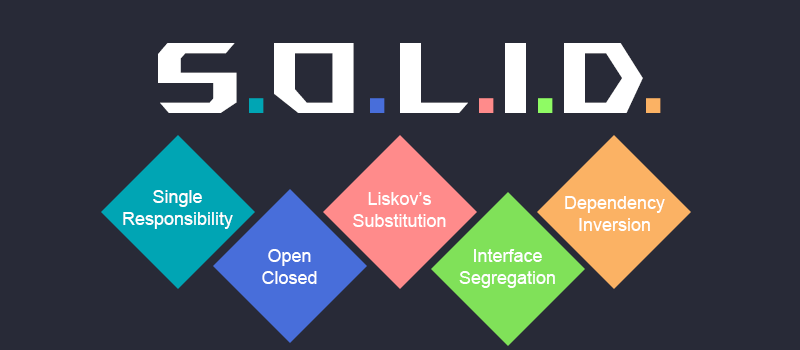
<style>
.page{position:relative;width:800px;height:350px;background:#282a37}
.page>*{position:absolute;margin:0}
.t1{font:100px "AniMeMatrix-MB_EN";color:#ffffff}
.t2{font:100px "AniMeMatrix-MB_EN";color:#00a5b4}
.t3{font:100px "AniMeMatrix-MB_EN";color:#486eda}
.t4{font:100px "AniMeMatrix-MB_EN";color:#ff8b8b}
.t5{font:100px "AniMeMatrix-MB_EN";color:#8ffb64}
.t6{font:100px "AniMeMatrix-MB_EN";color:#fbb264}
.t7{font:18px/22px "ArialMT";color:#ffffff}
</style>
<div class="page">
<p class="t1" style="left:158px;top:43px;width:485px;height:70px">S O L I D</p>
<p class="t2" style="left:249px;top:98px;width:15px;height:15px">.</p>
<p class="t3" style="left:370px;top:98px;width:15px;height:15px">.</p>
<p class="t4" style="left:479px;top:98px;width:15px;height:15px">.</p>
<p class="t5" style="left:538px;top:98px;width:15px;height:15px">.</p>
<p class="t6" style="left:646px;top:98px;width:15px;height:15px">.</p>
<p class="t7" style="left:123px;top:190px;width:110px;height:39px;text-align:center">Single<br>Responsibility</p>
<p class="t7" style="left:353px;top:192px;width:93px;height:35px;text-align:center">Liskov’s<br>Substitution</p>
<p class="t7" style="left:565px;top:196px;width:100px;height:35px;text-align:center">Dependency<br>Inversion</p>
<p class="t7" style="left:262px;top:249px;width:55px;height:35px;text-align:center">Open<br>Closed</p>
<p class="t7" style="left:459px;top:249px;width:96px;height:39px;text-align:center">Interface<br>Segregation</p>
</div>
